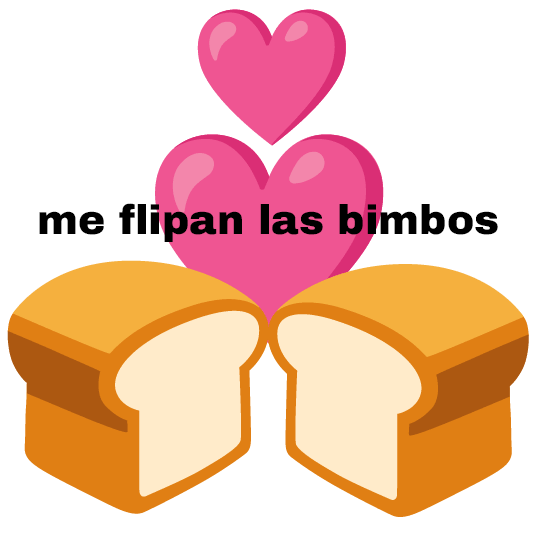
<style>
.page{position:relative;width:534px;height:534px;background:#ffffff}
.page>*{position:absolute;margin:0}
.t1{font:41px "ArchivoBlack-Regular";color:#000000}
</style>
<div class="page">
<p class="t1" style="left:39px;top:203px;width:459px;height:39px">me flipan las bimbos</p>
</div>
